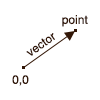
<style>
.page{position:relative;width:100px;height:100px;background:#ffffff}
.page>*{position:absolute;margin:0}
.t1{font:12px "Helvetica";color:#331707}
</style>
<div class="page">
<p class="t1" style="left:62px;top:15px;width:26px;height:12px">point</p>
<p class="t1" style="left:26px;top:33px;width:29px;height:23px;rotate:-35deg">vector</p>
<p class="t1" style="left:12px;top:75px;width:17px;height:11px">0,0</p>
</div>
